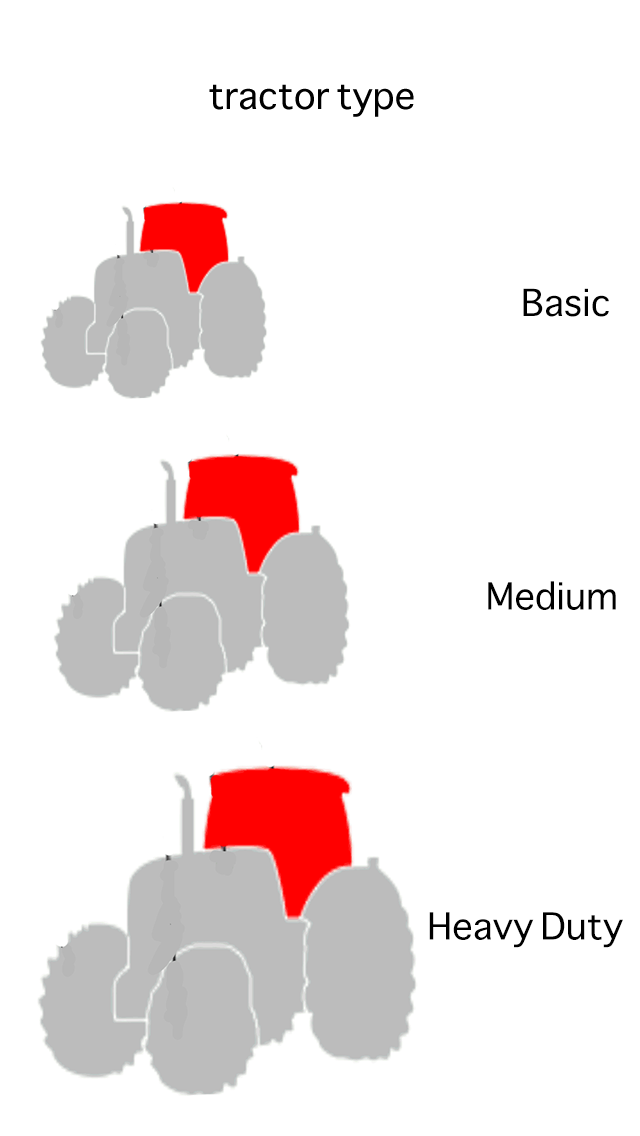
<style>
.page{position:relative;width:640px;height:1136px;background:#ffffff}
.page>*{position:absolute;margin:0}
.t1{font:36px "Sathu";color:#000000}
</style>
<div class="page">
<p class="t1" style="left:523px;top:288px;width:86px;height:29px">Basic</p>
<p class="t1" style="left:488px;top:581px;width:128px;height:29px">Medium</p>
<p class="t1" style="left:429px;top:912px;width:194px;height:36px">Heavy Duty</p>
</div>
